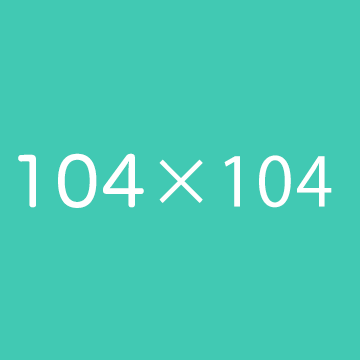
<style>
.page{position:relative;width:360px;height:360px;background:#41c9b3}
.page>*{position:absolute;margin:0}
.t1{font:66.7px "KozGoPr6N-Regular";letter-spacing:0.04em;color:#ffffff}
.t2{font:66.7px "HiraMaruProN-W4";letter-spacing:0.04em;color:#ffffff}
</style>
<div class="page">
<p class="t1" style="left:18px;top:153px;width:314px;height:55px"><span class="t2">104</span>×104</p>
</div>
